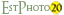
<style>
.page{position:relative;width:64px;height:15px;background:#ffffff}
.page>*{position:absolute;margin:0}
.t1{font:12.3px "TrajanPro-Regular";color:#82996f}
.t2{font:8.2px "TrajanPro-Regular";color:#82996f}
.t3{font:16.4px "TrajanPro-Regular";color:#82996f}
</style>
<div class="page">
<p class="t1" style="left:1px;top:1px;width:8px;height:13px">E</p>
<p class="t2" style="left:8px;top:5px;width:11px;height:6px">st</p>
<p class="t3" style="left:18px;top:1px;width:8px;height:13px">P</p>
<p class="t2" style="left:26px;top:5px;width:24px;height:6px">hoto</p>
</div>
